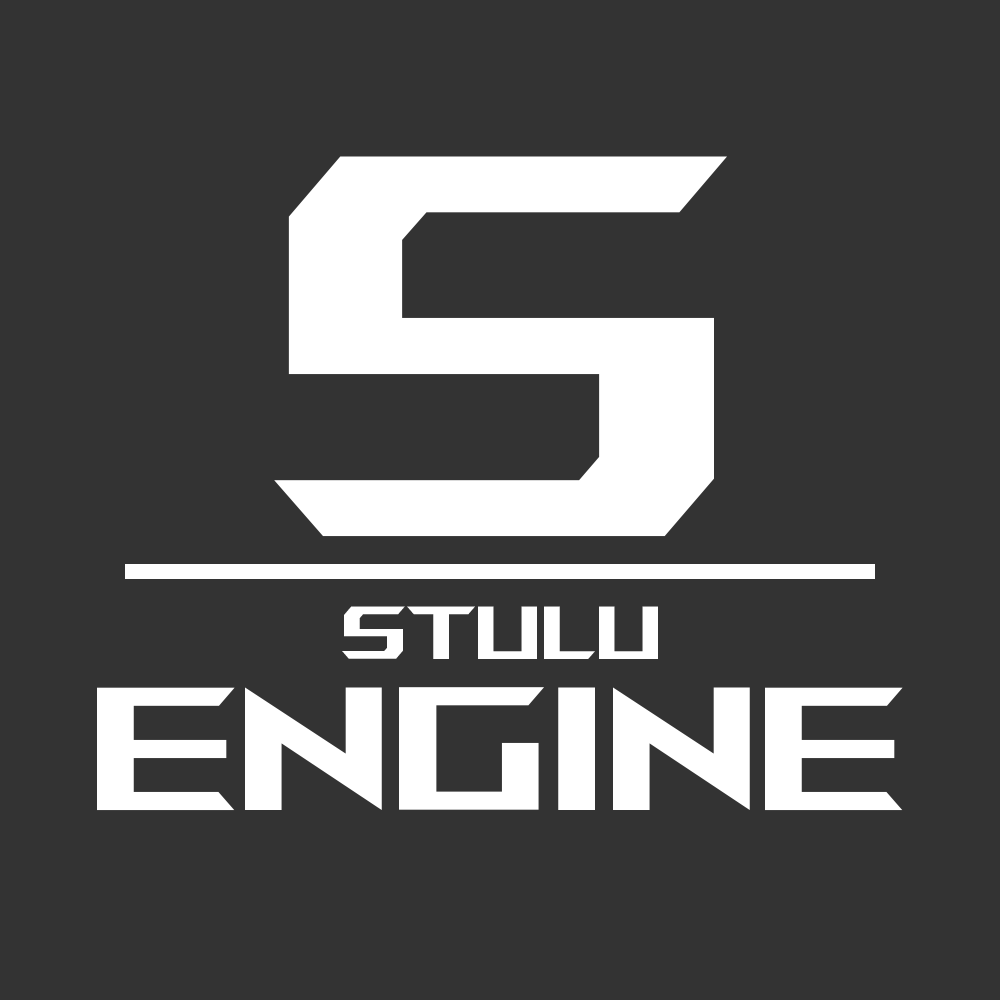
<style>
.page{position:relative;width:1000px;height:1000px;background:#333333}
.page>*{position:absolute;margin:0}
.t1{font:541.7px "ROGFonts-Regular";color:#ffffff}
.t2{font:75px "ROGFonts-Regular";color:#ffffff}
.t3{font:175px "ROGFonts-Regular";color:#ffffff}
</style>
<div class="page">
<p class="t1" style="left:274px;top:156px;width:453px;height:381px">S</p>
<p class="t2" style="left:342px;top:606px;width:316px;height:53px">Stulu</p>
<p class="t3" style="left:97px;top:687px;width:806px;height:124px">Engine</p>
</div>
